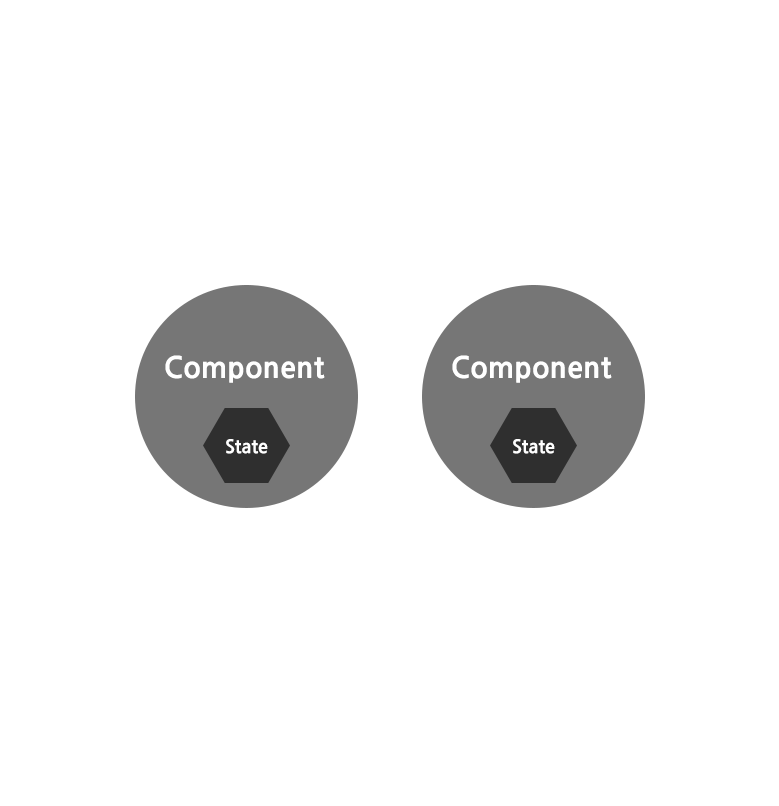
<style>
.page{position:relative;width:779px;height:806px;background:#ffffff}
.page>*{position:absolute;margin:0}
.t1{font:29.1px "NanumGothicExtraBold";color:#ffffff}
.t2{font:18.4px "NanumGothicExtraBold";color:#ffffff}
</style>
<div class="page">
<p class="t1" style="left:165px;top:355px;width:160px;height:28px">Component</p>
<p class="t1" style="left:452px;top:355px;width:160px;height:28px">Component</p>
<p class="t2" style="left:226px;top:439px;width:42px;height:15px">State</p>
<p class="t2" style="left:513px;top:439px;width:42px;height:15px">State</p>
</div>
